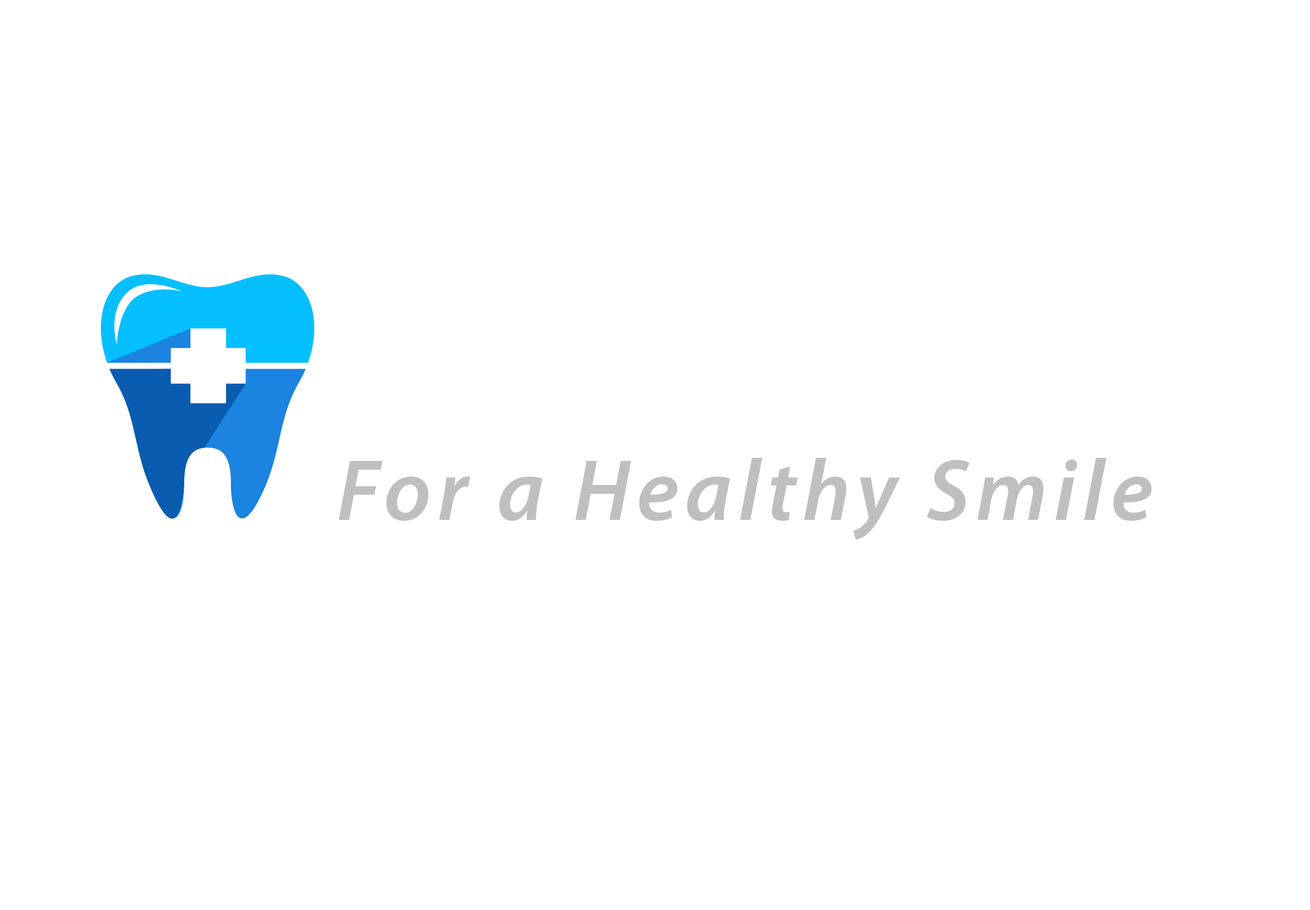
<style>
.page{position:relative;width:1310px;height:910px;background:#ffffff}
.page>*{position:absolute;margin:0}
.t1{font:87.4px "MyriadPro-SemiboldIt";letter-spacing:0.075em;color:#bfbfbf}
</style>
<div class="page">
<p class="t1" style="left:339px;top:458px;width:813px;height:82px">For a Healthy Smile</p>
</div>
